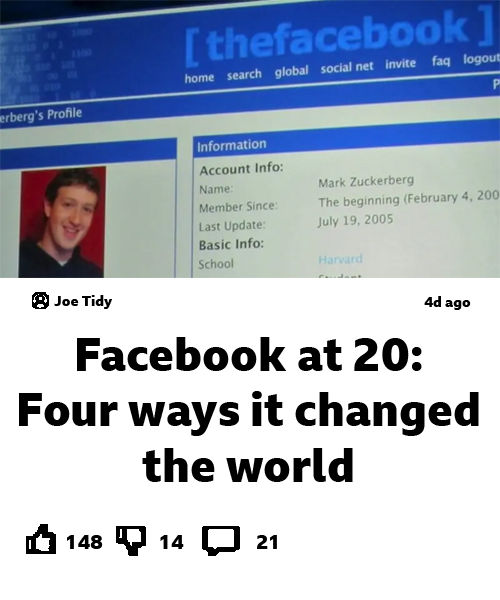
<style>
.page{position:relative;width:500px;height:600px;background:#ffffff}
.page>*{position:absolute;margin:0}
.t1{font:14.3px "BBCReithSans-XBold";color:#000000}
.t2{font:46px "BBCReithSans-XBold";color:#000000}
.t3{font:20px "BBCReithSans-XBold";color:#000000}
</style>
<div class="page">
<p class="t1" style="left:54px;top:295px;width:58px;height:14px">Joe Tidy</p>
<p class="t1" style="left:424px;top:296px;width:47px;height:14px">4d ago</p>
<p class="t2" style="left:19px;top:337px;width:460px;height:145px;text-align:center">Facebook at 20: Four ways it changed the world</p>
<p class="t3" style="left:67px;top:535px;width:36px;height:14px">148</p>
<p class="t3" style="left:160px;top:535px;width:24px;height:14px">14</p>
<p class="t3" style="left:257px;top:535px;width:20px;height:14px">21</p>
</div>
